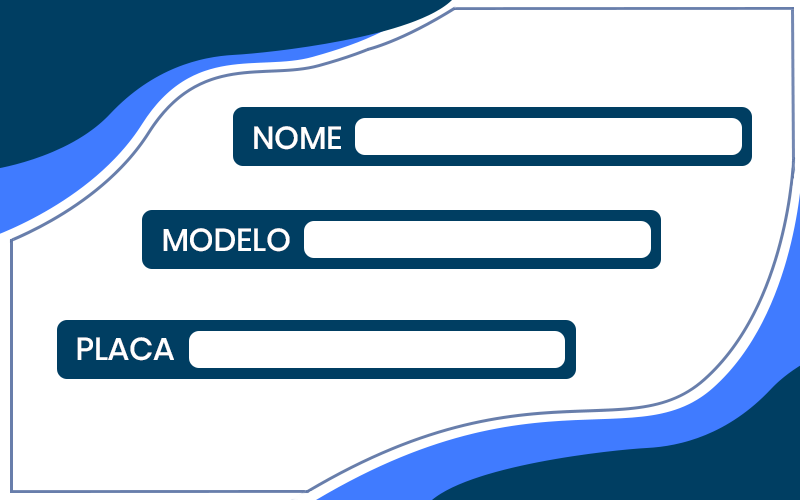
<style>
.page{position:relative;width:800px;height:500px;background:#ffffff}
.page>*{position:absolute;margin:0}
.t1{font:31.8px "Poppins-Medium";letter-spacing:-0.01em;color:#ffffff;text-transform:uppercase}
</style>
<div class="page">
<p class="t1" style="left:254px;top:126px;width:87px;height:24px">nome</p>
<p class="t1" style="left:163px;top:228px;width:127px;height:24px">modelo</p>
<p class="t1" style="left:77px;top:337px;width:97px;height:24px">placa</p>
</div>
